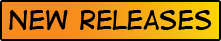
<style>
.page{position:relative;width:221px;height:41px;background:#000000}
.page>*{position:absolute;margin:0}
.t1{font:25px "DigitalStrip";color:#000000}
</style>
<div class="page">
<p class="t1" style="left:9px;top:10px;width:203px;height:20px">New releases</p>
</div>
